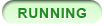
<style>
.page{position:relative;width:104px;height:26px}
.page>*{position:absolute;margin:0}
.t1{font:14px "Arial-BoldMT";letter-spacing:0.05em;color:#228e22}
</style>
<div class="page">
<p class="t1" style="left:18px;top:8px;width:69px;height:10px">RUNNING</p>
</div>
